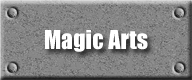
<style>
.page{position:relative;width:192px;height:80px}
.page>*{position:absolute;margin:0}
.t1{font:24px "Impact";color:#ffffff}
</style>
<div class="page">
<p class="t1" style="left:45px;top:30px;width:103px;height:22px">Magic Arts</p>
</div>
